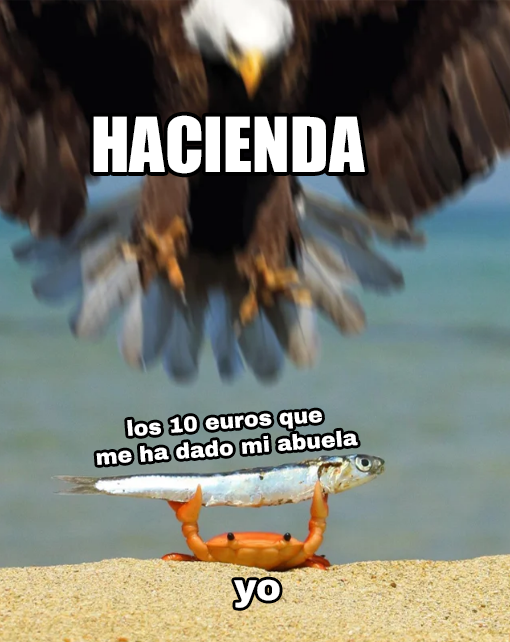
<style>
.page{position:relative;width:510px;height:642px}
.page>*{position:absolute;margin:0}
.t1{font:69.7px "Impact";color:#ffffff}
.t2{font:21.8px "ArchivoBlack-Regular";color:#ffffff}
.t3{font:37.2px "ArchivoBlack-Regular";color:#ffffff}
</style>
<div class="page">
<p class="t1" style="left:93px;top:115px;width:272px;height:59px">HACIENDA</p>
<p class="t2" style="left:96px;top:410px;width:262px;height:55px;text-align:center;rotate:-4deg">los 10 euros que<br>me ha dado mi abuela</p>
<p class="t3" style="left:234px;top:579px;width:46px;height:29px">yo</p>
</div>
